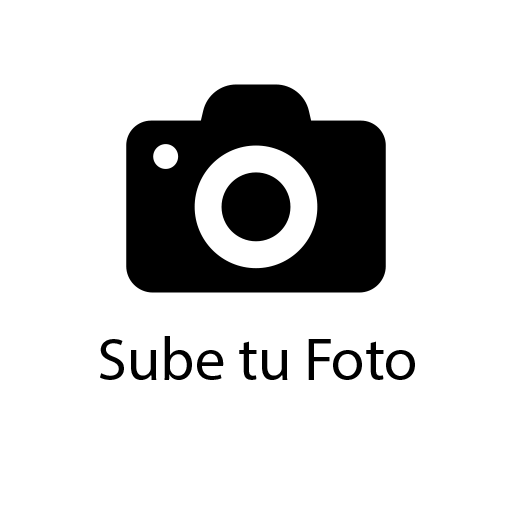
<style>
.page{position:relative;width:512px;height:512px;background:#ffffff}
.page>*{position:absolute;margin:0}
.t1{font:60.4px "MyriadPro-Regular";color:#000000}
</style>
<div class="page">
<p class="t1" style="left:100px;top:336px;width:315px;height:44px">Sube tu Foto</p>
</div>
